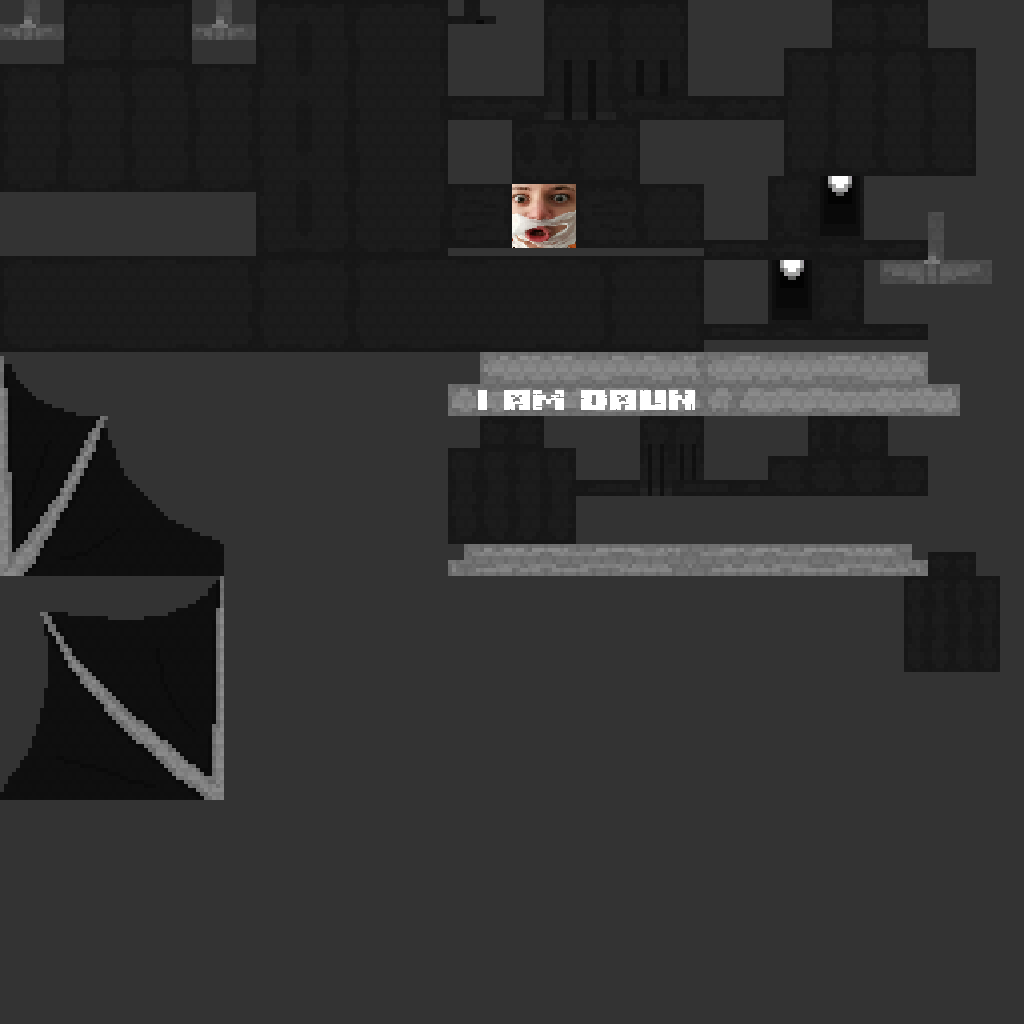
<style>
.page{position:relative;width:1024px;height:1024px;background:#333333}
.page>*{position:absolute;margin:0}
.t1{font:20px "Minecraft-Title-Cyrillic";color:#ffffff;scale:1.47 1}
</style>
<div class="page">
<p class="t1" style="left:478px;top:390px;width:217px;height:20px">I AM DAUN</p>
</div>
